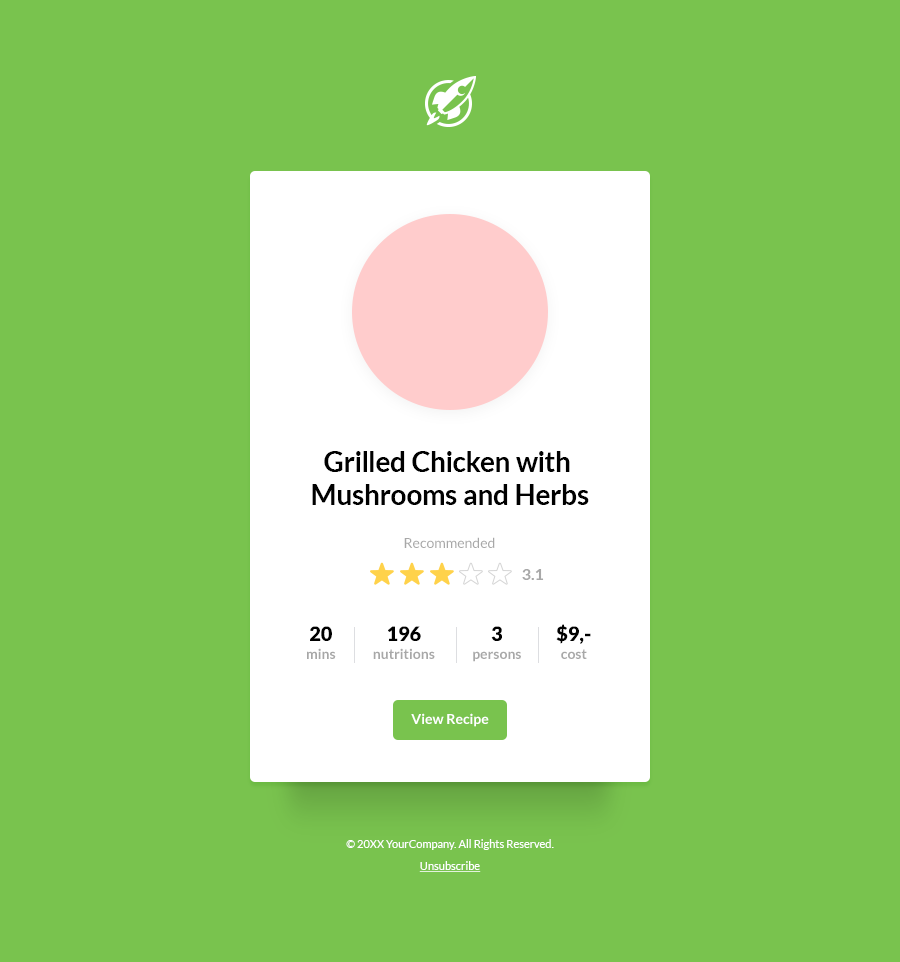
<style>
.page{position:relative;width:900px;height:962px;background:#79c34e}
.page>*{position:absolute;margin:0}
.t1{font:28px "Lato-Bold";color:#000000}
.t2{font:14px "Lato-Regular";color:#a8a8a8}
.t3{font:16px "Lato-Bold";color:#a8a8a8}
.t4{font:14px/18px "Lato-Bold";color:#a7a7a7}
.t5{font:20px/18px "Lato-Black";color:#000000}
.t6{font:14px/18px "Lato-Bold";color:#a8a8a8}
.t7{font:14px "Lato-Bold";color:#ffffff}
.t8{font:11px/22px "Lato-Regular";color:#ffffff}
.t9{font:11px/22px "Lato-Regular";color:#ffffff;text-decoration:underline}
</style>
<div class="page">
<p class="t1" style="left:312px;top:451px;width:277px;height:54px;text-align:center">Grilled Chicken with <br>Mushrooms and Herbs</p>
<p class="t2" style="left:404px;top:537px;width:91px;height:11px">Recommended</p>
<p class="t3" style="left:522px;top:569px;width:22px;height:11px">3.1</p>
<p class="t4" style="left:307px;top:626px;width:29px;height:33px;text-align:center"><span class="t5">20<br></span>mins</p>
<p class="t6" style="left:373px;top:626px;width:62px;height:33px;text-align:center"><span class="t5">196<br></span>nutritions</p>
<p class="t6" style="left:473px;top:626px;width:48px;height:36px;text-align:center"><span class="t5">3<br></span>persons</p>
<p class="t5" style="left:556px;top:624px;width:35px;height:35px;text-align:center">$9,-<br><span class="t6">cost</span></p>
<p class="t7" style="left:411px;top:713px;width:78px;height:14px">View Recipe</p>
<p class="t8" style="left:346px;top:839px;width:208px;height:33px;text-align:center">© 20XX YourCompany. All Rights Reserved.<br><span class="t9">Unsubscribe</span></p>
</div>
